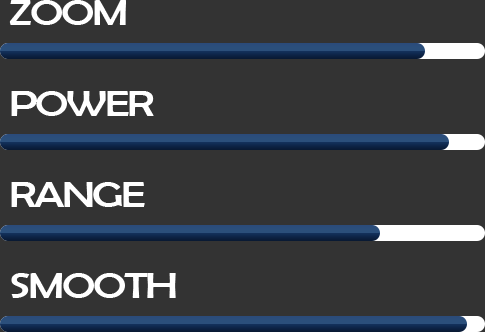
<style>
.page{position:relative;width:485px;height:332px;background:#333333}
.page>*{position:absolute;margin:0}
.t1{font:36.8px "BerlinSansFB-Reg";letter-spacing:-0.05em;color:#ffffff;text-transform:uppercase;scale:1.24 1}
</style>
<div class="page">
<p class="t1" style="left:9px;top:0px;width:117px;height:25px">zoom</p>
<p class="t1" style="left:11px;top:91px;width:143px;height:25px">power</p>
<p class="t1" style="left:11px;top:182px;width:134px;height:25px">range</p>
<p class="t1" style="left:11px;top:273px;width:165px;height:25px">smooth</p>
</div>
